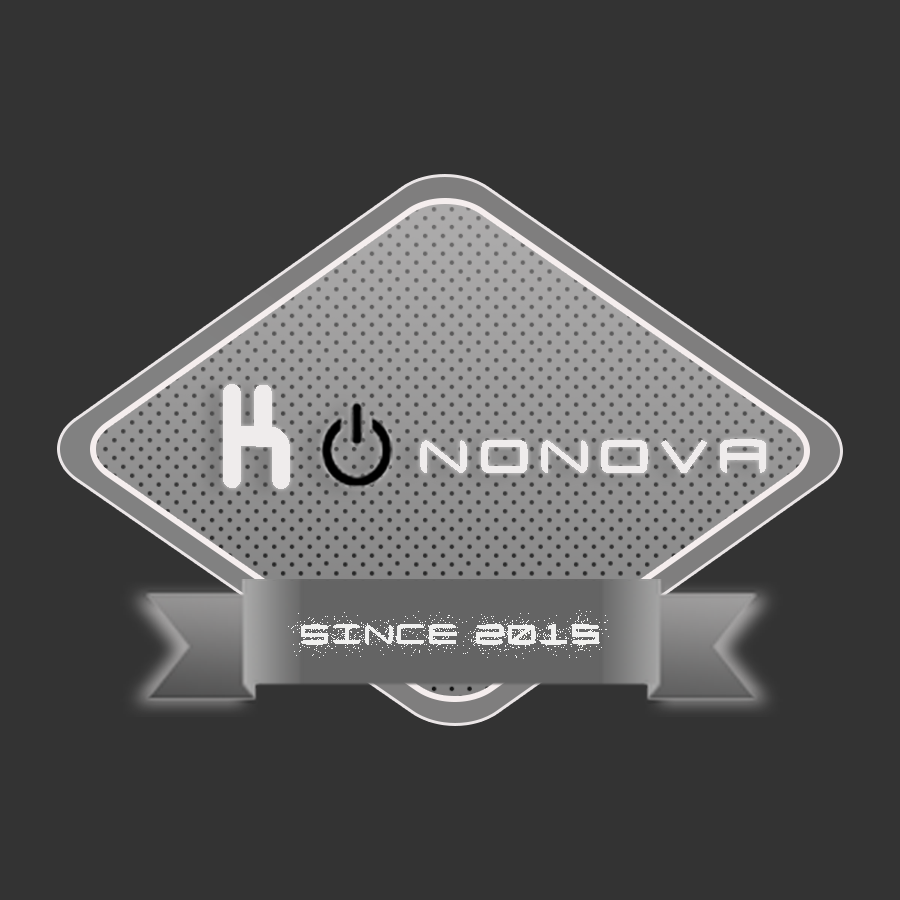
<style>
.page{position:relative;width:900px;height:900px;background:#333333}
.page>*{position:absolute;margin:0}
.t1{font:150px "DesignerBlock";letter-spacing:0.26em;color:#efecec;text-transform:uppercase;scale:0.86 1}
.t2{font:80px "Neutronium";letter-spacing:0.14em;color:#efecec;text-transform:uppercase}
.t3{font:48px "Neutronium";letter-spacing:0.06em;color:#f0f0ef;text-transform:uppercase}
</style>
<div class="page">
<p class="t1" style="left:223px;top:384px;width:67px;height:105px;rotate:1deg">k</p>
<p class="t2" style="left:420px;top:439px;width:346px;height:34px">nonova</p>
<p class="t3" style="left:301px;top:624px;width:298px;height:21px">since 2015</p>
</div>
